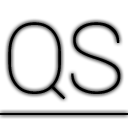
<style>
.page{position:relative;width:128px;height:128px;background:#ffffff}
.page>*{position:absolute;margin:0}
.t1{font:98px "Roboto-Thin";color:#000000}
</style>
<div class="page">
<p class="t1" style="left:8px;top:22px;width:113px;height:78px">QS</p>
</div>
